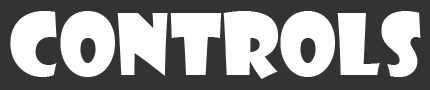
<style>
.page{position:relative;width:430px;height:90px;background:#333333}
.page>*{position:absolute;margin:0}
.t1{font:83.3px "ShowcardGothic-Reg";color:#ffffff}
</style>
<div class="page">
<p class="t1" style="left:10px;top:11px;width:411px;height:68px">Controls</p>
</div>
